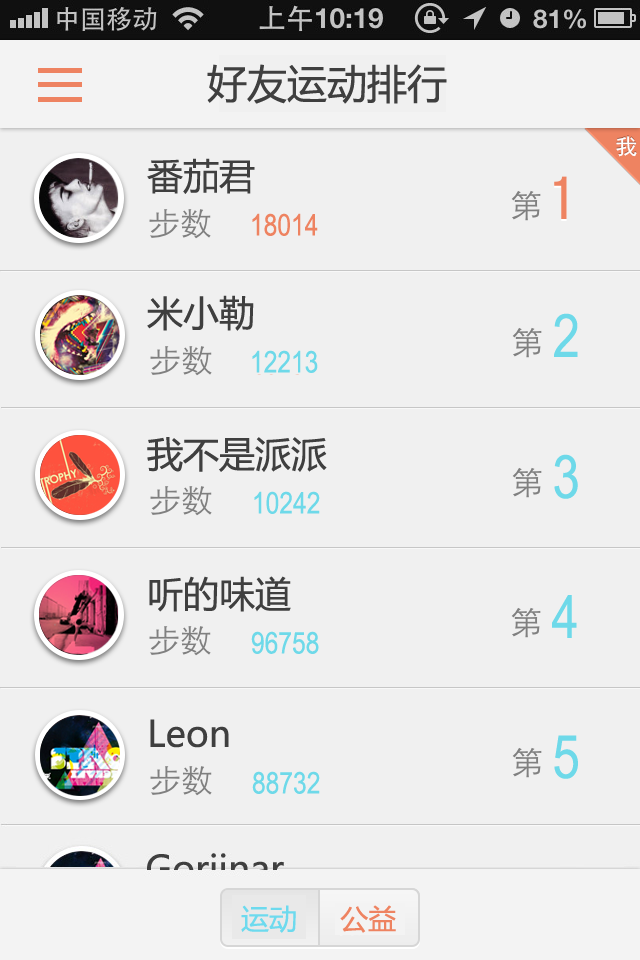
<style>
.page{position:relative;width:640px;height:960px;background:#f0f0f0}
.page>*{position:absolute;margin:0}
.t1{font:40px "MicrosoftYaHei";color:#3f3f3f}
.t2{font:36px "MicrosoftYaHei";color:#3f3f3f}
.t3{font:30px "ArialNarrow";color:#ee8361}
.t4{font:60px "ArialNarrow";color:#6ed9e9}
.t5{font:30px "ArialNarrow";color:#6ed9e9}
.t6{font:28px "MicrosoftYaHei";color:#6ddaee}
.t7{font:28px "MicrosoftYaHei";color:#ee8361}
</style>
<div class="page">
<p class="t1" style="left:207px;top:64px;width:240px;height:40px">好友运动排行</p>
<p class="t2" style="left:147px;top:158px;width:108px;height:36px">番茄君</p>
<p class="t3" style="left:252px;top:213px;width:66px;height:23px">18014</p>
<p class="t2" style="left:147px;top:295px;width:107px;height:36px">米小勒</p>
<p class="t4" style="left:554px;top:313px;width:24px;height:44px">2</p>
<p class="t5" style="left:252px;top:350px;width:66px;height:23px">12213</p>
<p class="t2" style="left:147px;top:437px;width:180px;height:35px">我不是派派</p>
<p class="t4" style="left:554px;top:454px;width:24px;height:45px">3</p>
<p class="t5" style="left:254px;top:491px;width:66px;height:23px">10242</p>
<p class="t2" style="left:149px;top:576px;width:142px;height:36px">听的味道</p>
<p class="t4" style="left:552px;top:595px;width:25px;height:43px">4</p>
<p class="t5" style="left:251px;top:631px;width:68px;height:23px">96758</p>
<p class="t2" style="left:150px;top:719px;width:79px;height:29px">Leon</p>
<p class="t4" style="left:554px;top:735px;width:24px;height:44px">5</p>
<p class="t5" style="left:252px;top:771px;width:68px;height:23px">88732</p>
<p class="t6" style="left:241px;top:905px;width:55px;height:28px">运动</p>
<p class="t7" style="left:340px;top:905px;width:56px;height:28px">公益</p>
</div>
